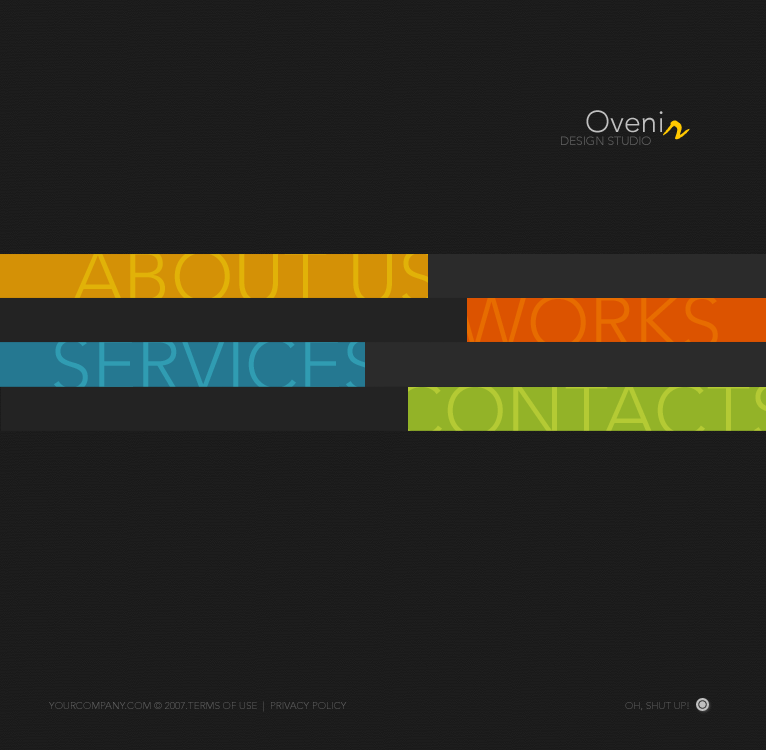
<style>
.page{position:relative;width:766px;height:750px;background:#1d1d1d}
.page>*{position:absolute;margin:0}
.t1{font:30px "Avenir-Light";color:#c0c0c0}
.t2{font:30px "Avenir-Light";letter-spacing:0.12em;color:#c0c0c0}
.t3{font:52px "Staccato222BT-Regular";letter-spacing:0.12em;color:#ffc800}
.t4{font:12px "Avenir-Light";color:#626262;text-transform:uppercase}
.t5{font:75px "Avenir-Light";text-transform:uppercase}
.t6{font:10px "Avenir-Light";color:#626262;text-transform:uppercase}
</style>
<div class="page">
<p class="t1" style="left:586px;top:110px;width:104px;height:30px">Oven<span class="t2">i</span><span class="t3">r</span></p>
<p class="t4" style="left:561px;top:136px;width:90px;height:9px">design studio</p>
<p class="t5" style="left:54px;top:336px;width:326px;height:57px">services</p>
<p class="t6" style="left:49px;top:701px;width:298px;height:11px">YourCompany.Com © 2007.Terms of use  |  Privacy Policy</p>
<p class="t6" style="left:625px;top:702px;width:64px;height:9px">oh, shut up!</p>
</div>
